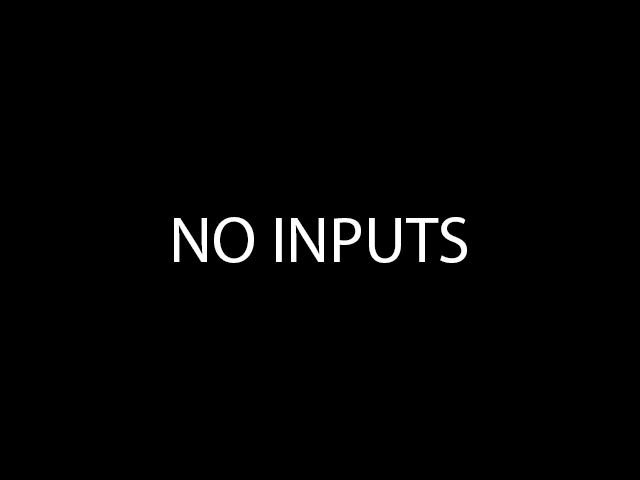
<style>
.page{position:relative;width:640px;height:480px;background:#000000}
.page>*{position:absolute;margin:0}
.t1{font:65px "MyriadPro-Regular";color:#ffffff}
</style>
<div class="page">
<p class="t1" style="left:174px;top:217px;width:293px;height:46px">NO INPUTS</p>
</div>
